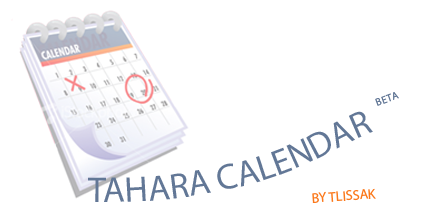
<style>
.page{position:relative;width:430px;height:218px;background:#ffffff}
.page>*{position:absolute;margin:0}
.t1{font:36px "MyriadPro-Regular";color:#627796;text-transform:uppercase}
.t2{font:18px "MyriadPro-Regular";color:#627796;text-transform:uppercase}
.t3{font:14px "MyriadPro-Regular";color:#fb781b}
</style>
<div class="page">
<p class="t1" style="left:88px;top:92px;width:311px;height:110px">Tahara Calendar <span class="t2">beta</span></p>
<p class="t3" style="left:312px;top:188px;width:64px;height:15px">BY TLISSAK</p>
</div>
